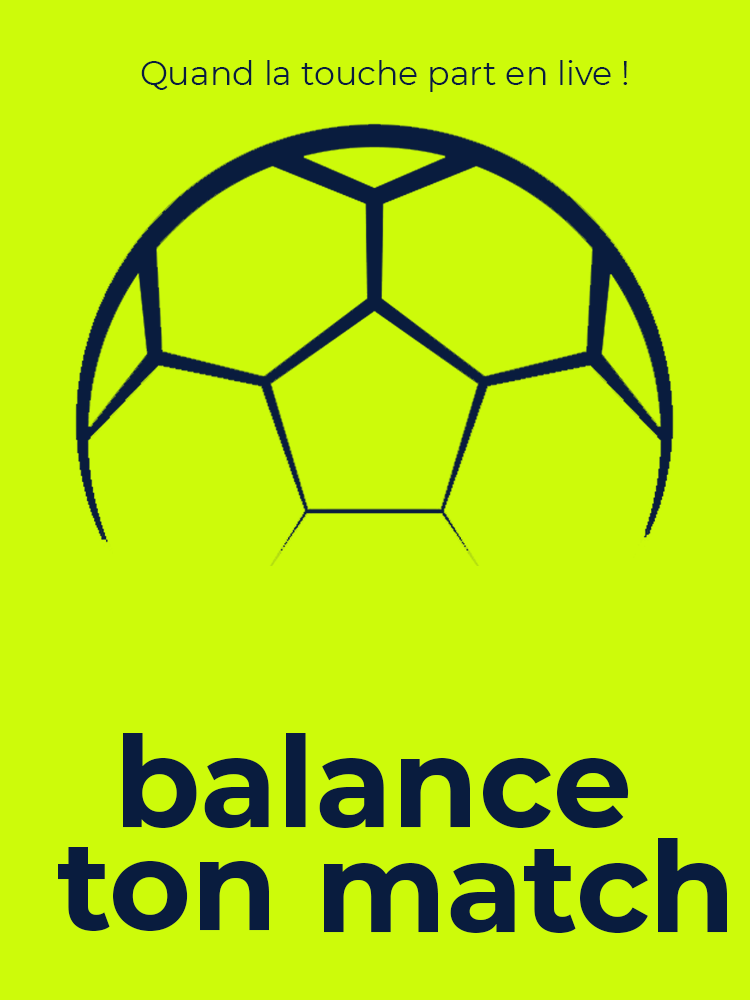
<style>
.page{position:relative;width:750px;height:1000px;background:#cdfb0a}
.page>*{position:absolute;margin:0}
.t1{font:33.3px "Montserrat-Regular";color:#091c3e}
.t2{font:125.3px "Montserrat-Bold";color:#091c3e}
</style>
<div class="page">
<p class="t1" style="left:141px;top:60px;width:487px;height:32px">Quand la touche part en live !</p>
<p class="t2" style="left:123px;top:733px;width:506px;height:95px">balance</p>
<p class="t2" style="left:324px;top:838px;width:403px;height:95px">match</p>
<p class="t2" style="left:58px;top:847px;width:211px;height:84px">ton</p>
</div>
